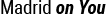
<style>
.page{position:relative;width:108px;height:19px;background:#ffffff}
.page>*{position:absolute;margin:0}
.t1{font:18.7px "RobotoCondensed-Regular";color:#000000}
.t2{font:18.7px "RobotoCondensed-BoldItalic";color:#000000}
</style>
<div class="page">
<p class="t1" style="left:1px;top:0px;width:105px;height:14px">Madrid <span class="t2">on You</span></p>
</div>
